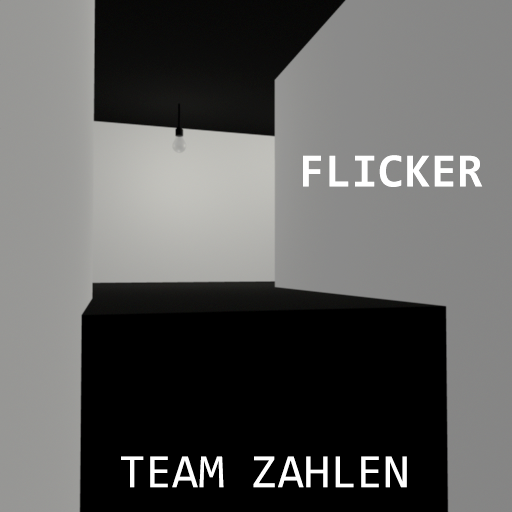
<style>
.page{position:relative;width:512px;height:512px;background:#000000}
.page>*{position:absolute;margin:0}
.t1{font:48px "Consolas-Bold";color:#ffffff}
.t2{font:48px "Consolas";color:#ffffff}
</style>
<div class="page">
<p class="t1" style="left:303px;top:155px;width:180px;height:32px">FLICKER</p>
<p class="t2" style="left:121px;top:456px;width:286px;height:32px">TEAM ZAHLEN</p>
</div>
